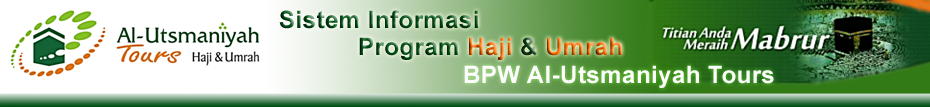
<style>
.page{position:relative;width:930px;height:107px;background:#ffffff}
.page>*{position:absolute;margin:0}
.t1{font:24px "Arial-BoldMT";letter-spacing:0.02em}
.t2{font:24px "Arial-BoldMT";letter-spacing:0.02em;color:#fcfdfc}
</style>
<div class="page">
<p class="t1" style="left:279px;top:10px;width:199px;height:19px">Sistem Informasi</p>
<p class="t1" style="left:359px;top:37px;width:263px;height:23px">Program Haji &amp; Umrah</p>
<p class="t2" style="left:464px;top:65px;width:310px;height:23px">BPW Al-Utsmaniyah Tours</p>
</div>
